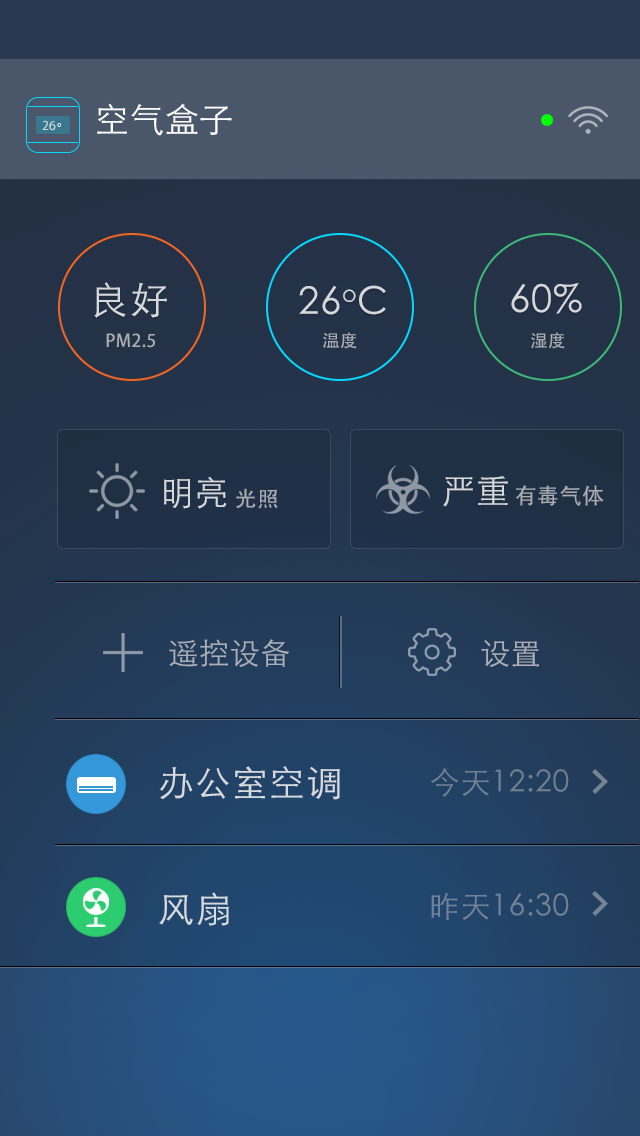
<style>
.page{position:relative;width:640px;height:1136px}
.page>*{position:absolute;margin:0}
.t1{font:34px "STHeitiSC-Light";letter-spacing:0.025em;color:#ffffff}
.t2{font:12px "AdobeHeitiStd-Regular";letter-spacing:0.025em;color:#c9d6dc}
.t3{font:12px "AdobeHeitiStd-Regular";letter-spacing:0.025em}
.t4{font:38px "STHeitiSC-Light";letter-spacing:0.025em;color:#d7d8db}
.t5{font:30px "AdobeHeitiStd-Regular";letter-spacing:0.025em;color:#aaadb3}
.t6{font:34px "STHeitiSC-Light";letter-spacing:0.025em;color:#d6d8db}
.t7{font:34px "STHeitiSC-Light";letter-spacing:0.025em;color:#d6d8da}
.t8{font:22px "AdobeHeitiStd-Regular";letter-spacing:0.025em;color:#a9adb2}
.t9{font:22px "AdobeHeitiStd-Regular";letter-spacing:0.025em;color:#a9adb3}
.t10{font:30px "STHeitiSC-Light";letter-spacing:0.025em;color:#aab0b9}
.t11{font:30px "STHeitiSC-Light";letter-spacing:0.025em;color:#aaafb8}
.t12{font:36px "STHeitiSC-Light";letter-spacing:0.025em;color:#d6dadf}
.t13{font:30px "STHeitiSC-Light";letter-spacing:0.025em;color:#728092}
.t14{font:36px "STHeitiSC-Light";letter-spacing:0.025em;color:#d6dbe1}
.t15{font:30px "STHeitiSC-Light";letter-spacing:0.025em;color:#728298}
</style>
<div class="page">
<p class="t1" style="left:97px;top:103px;width:135px;height:33px">空气盒子</p>
<p class="t2" style="left:42px;top:120px;width:14px;height:11px">26</p>
<p class="t3" style="left:57px;top:123px;width:4px;height:4px">o</p>
<p class="t4" style="left:94px;top:282px;width:73px;height:36px">良好</p>
<p class="t4" style="left:299px;top:285px;width:87px;height:30px">26oC</p>
<p class="t4" style="left:511px;top:283px;width:71px;height:31px">60%</p>
<p class="t5" style="left:106px;top:333px;width:49px;height:15px">PM2.5</p>
<p class="t5" style="left:323px;top:332px;width:34px;height:17px">温度</p>
<p class="t5" style="left:531px;top:332px;width:34px;height:17px">湿度</p>
<p class="t6" style="left:164px;top:476px;width:63px;height:33px">明亮</p>
<p class="t7" style="left:443px;top:476px;width:65px;height:31px">严重</p>
<p class="t8" style="left:515px;top:485px;width:89px;height:21px">有毒气体</p>
<p class="t9" style="left:236px;top:488px;width:42px;height:21px">光照</p>
<p class="t10" style="left:169px;top:639px;width:121px;height:28px">遥控设备</p>
<p class="t11" style="left:481px;top:640px;width:58px;height:27px">设置</p>
<p class="t12" style="left:159px;top:766px;width:181px;height:34px">办公室空调</p>
<p class="t13" style="left:430px;top:768px;width:139px;height:29px">今天12:20</p>
<p class="t14" style="left:159px;top:892px;width:70px;height:34px">风扇</p>
<p class="t15" style="left:431px;top:892px;width:138px;height:28px">昨天16:30</p>
</div>
